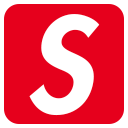
<style>
.page{position:relative;width:128px;height:128px;background:#e6001c}
.page>*{position:absolute;margin:0}
.t1{font:128px "Futura-HeavyOblique";color:#ffffff}
</style>
<div class="page">
<p class="t1" style="left:29px;top:14px;width:71px;height:102px">S</p>
</div>
